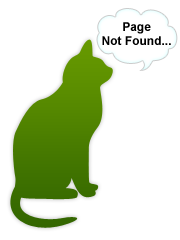
<style>
.page{position:relative;width:180px;height:240px;background:#ffffff}
.page>*{position:absolute;margin:0}
.t1{font:12px "Arial-BoldMT";color:#000000}
</style>
<div class="page">
<p class="t1" style="left:102px;top:22px;width:69px;height:23px;text-align:center">Page<br>Not Found...</p>
</div>
